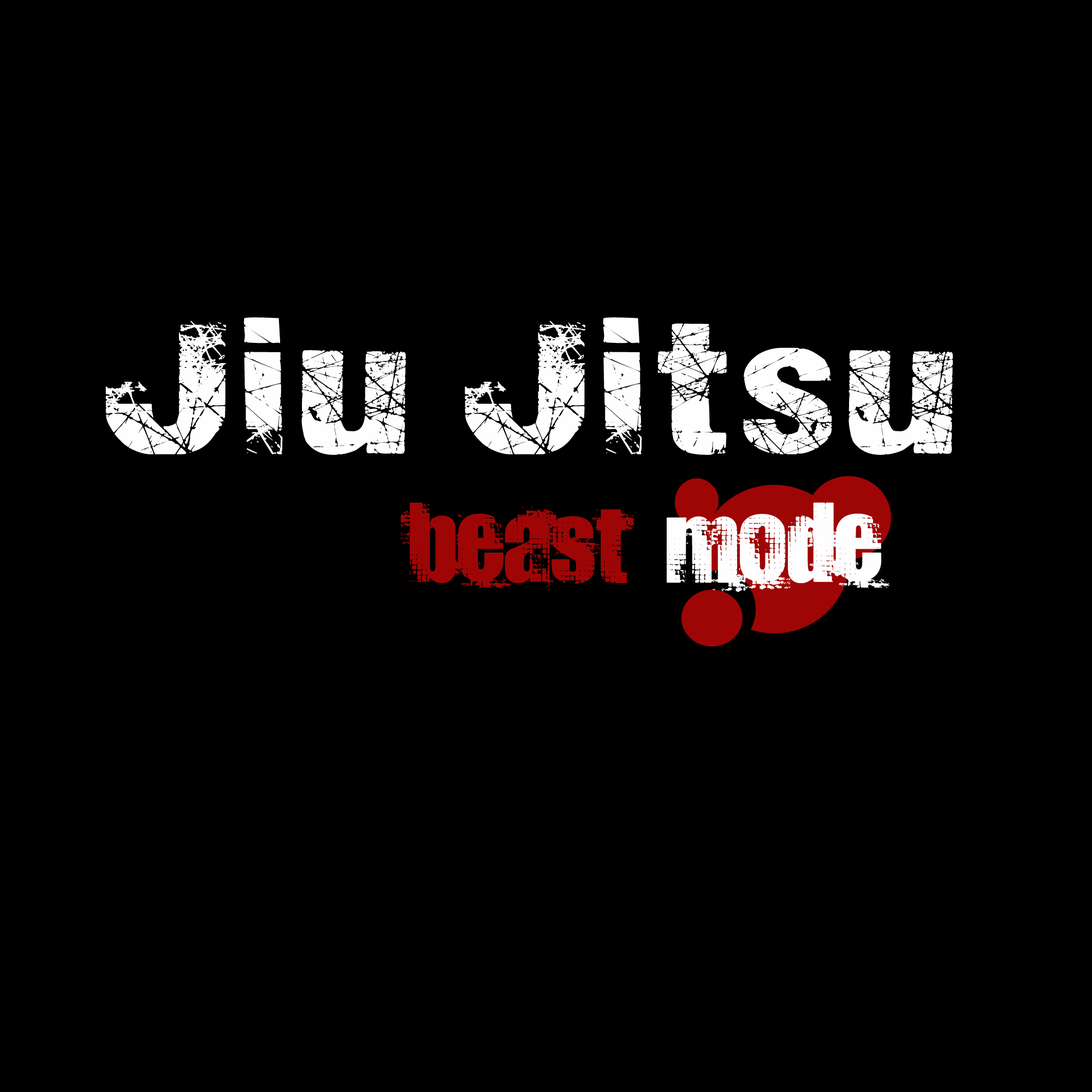
<style>
.page{position:relative;width:1092px;height:1092px;background:#000000}
.page>*{position:absolute;margin:0}
.t1{font:191.1px "ActionoftheTimeNew";color:#fefefe}
.t2{font:136.5px "DocteurAtomic";color:#9e0606}
.t3{font:136.5px "DocteurAtomic";color:#fefefe}
</style>
<div class="page">
<p class="t1" style="left:105px;top:317px;width:848px;height:138px">Jiu Jitsu</p>
<p class="t2" style="left:401px;top:502px;width:488px;height:90px">beast <span class="t3">mode</span></p>
</div>
